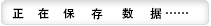
<style>
.page{position:relative;width:211px;height:26px;background:#ffffff}
.page>*{position:absolute;margin:0}
.t1{font:12px "AdobeHeitiStd-Regular";color:#000000}
</style>
<div class="page">
<p class="t1" style="left:12px;top:7px;width:176px;height:13px">正     在     保      存       数      据 ……</p>
</div>
